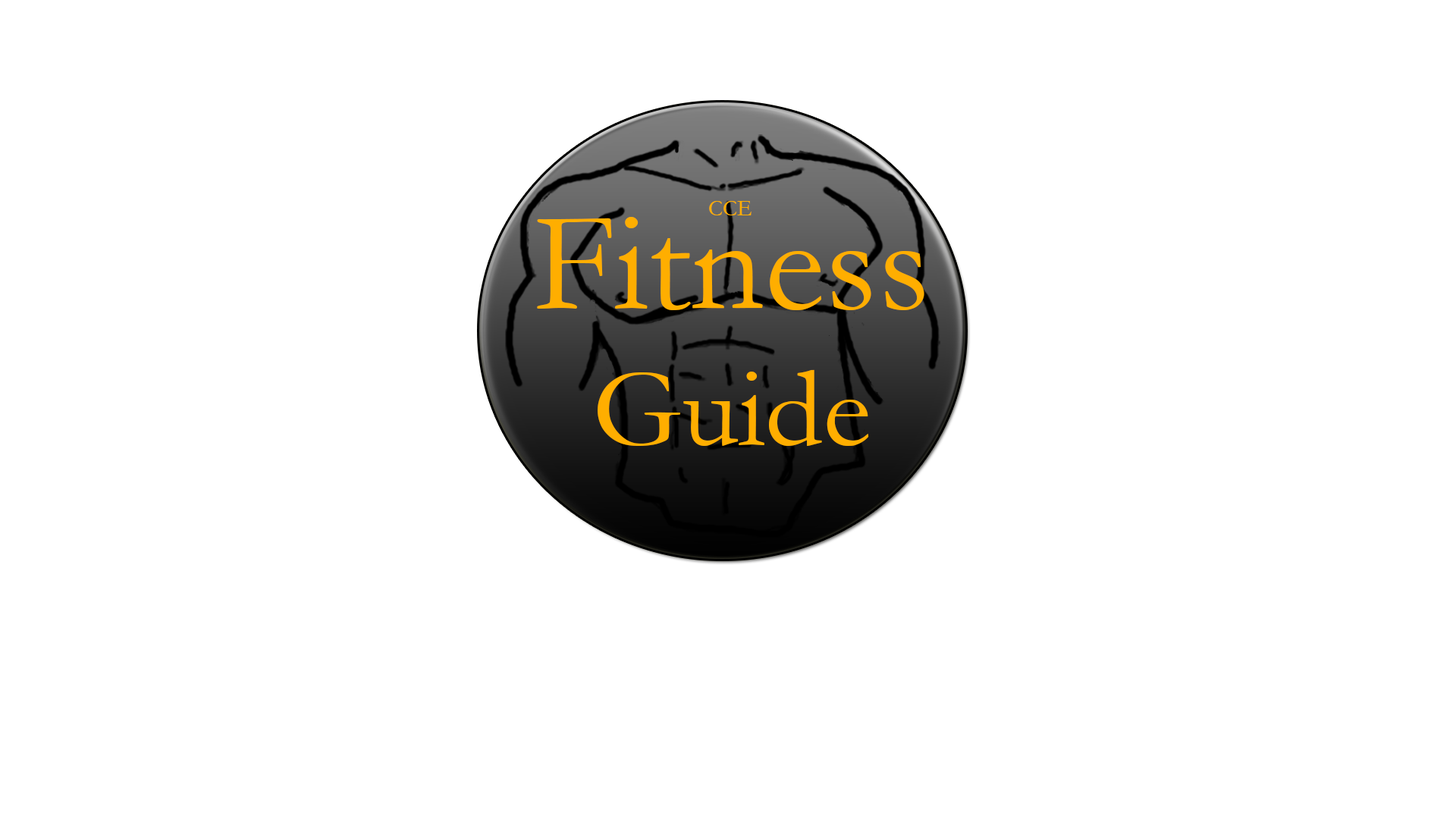
<style>
.page{position:relative;width:1456px;height:819px;background:#ffffff}
.page>*{position:absolute;margin:0}
.t1{font:22.7px "Garamond";color:#ffae00}
.t2{font:142.4px "Garamond";color:#ffae00}
.t3{font:57px "Garamond";color:#ffae00}
.t4{font:114px "Garamond";color:#ffae00}
</style>
<div class="page">
<p class="t1" style="left:709px;top:201px;width:42px;height:14px">CCE</p>
<p class="t2" style="left:537px;top:217px;width:387px;height:229px;text-align:center"><span class="t3"><br></span>Fitness<br><span class="t4">Guide</span></p>
</div>
